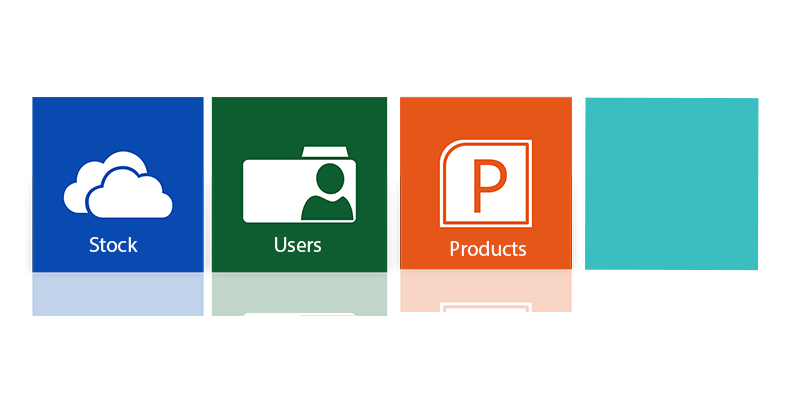
<style>
.page{position:relative;width:800px;height:400px;background:#ffffff}
.page>*{position:absolute;margin:0}
.t1{font:21px "MyriadPro-Regular";color:#ffffff}
</style>
<div class="page">
<p class="t1" style="left:89px;top:237px;width:49px;height:15px">Stock</p>
<p class="t1" style="left:275px;top:237px;width:46px;height:15px">Users</p>
<p class="t1" style="left:450px;top:241px;width:76px;height:15px">Products</p>
</div>
